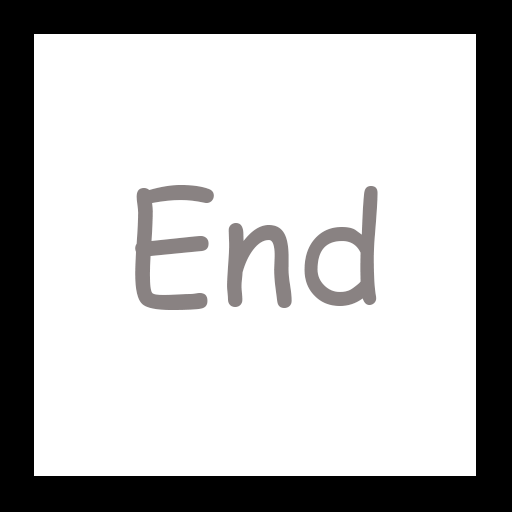
<style>
.page{position:relative;width:512px;height:512px;background:#ffffff}
.page>*{position:absolute;margin:0}
.t1{font:150px "ComicSansMS";color:#898282}
</style>
<div class="page">
<p class="t1" style="left:135px;top:185px;width:243px;height:125px">End</p>
</div>
